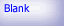
<style>
.page{position:relative;width:64px;height:26px}
.page>*{position:absolute;margin:0}
.t1{font:10.5px "Tahoma";color:#0000ff}
</style>
<div class="page">
<p class="t1" style="left:4px;top:4px;width:26px;height:9px">Blank</p>
</div>
